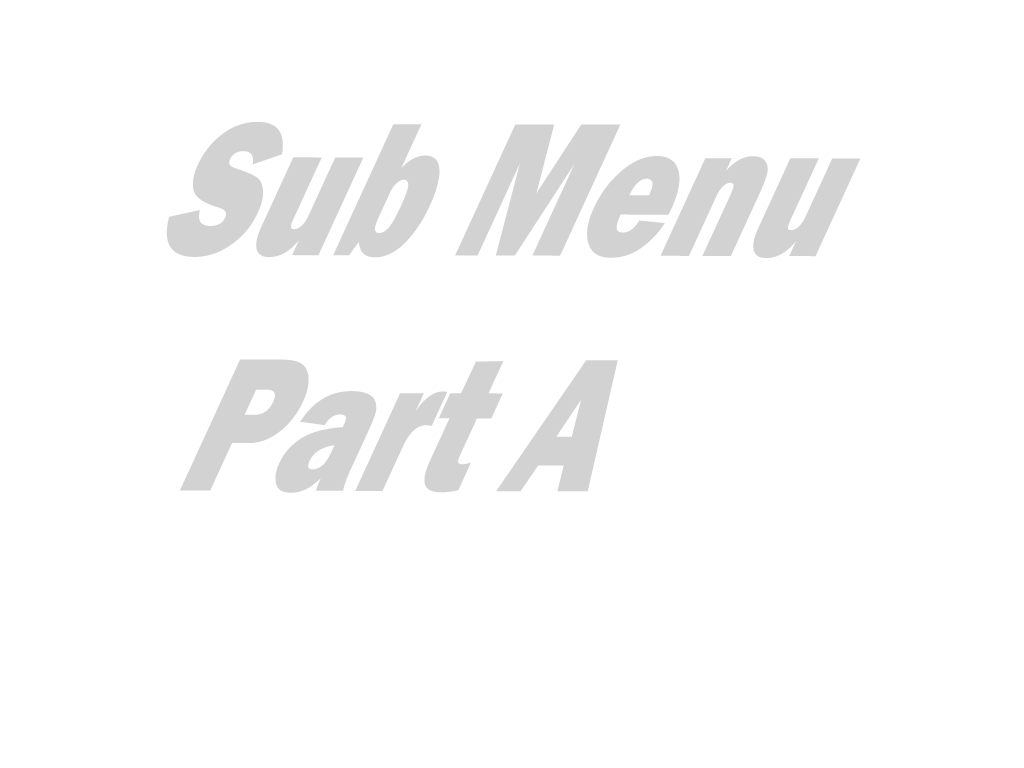
<style>
.page{position:relative;width:1024px;height:768px;background:#ffffff}
.page>*{position:absolute;margin:0}
.t1{font:215.9px "FranklinGothic-Heavy";color:#d2d2d2;scale:0.67 1}
</style>
<div class="page">
<p class="t1" style="left:166px;top:122px;width:695px;height:371px;text-align:center">Sub Menu<br>Part A</p>
</div>
